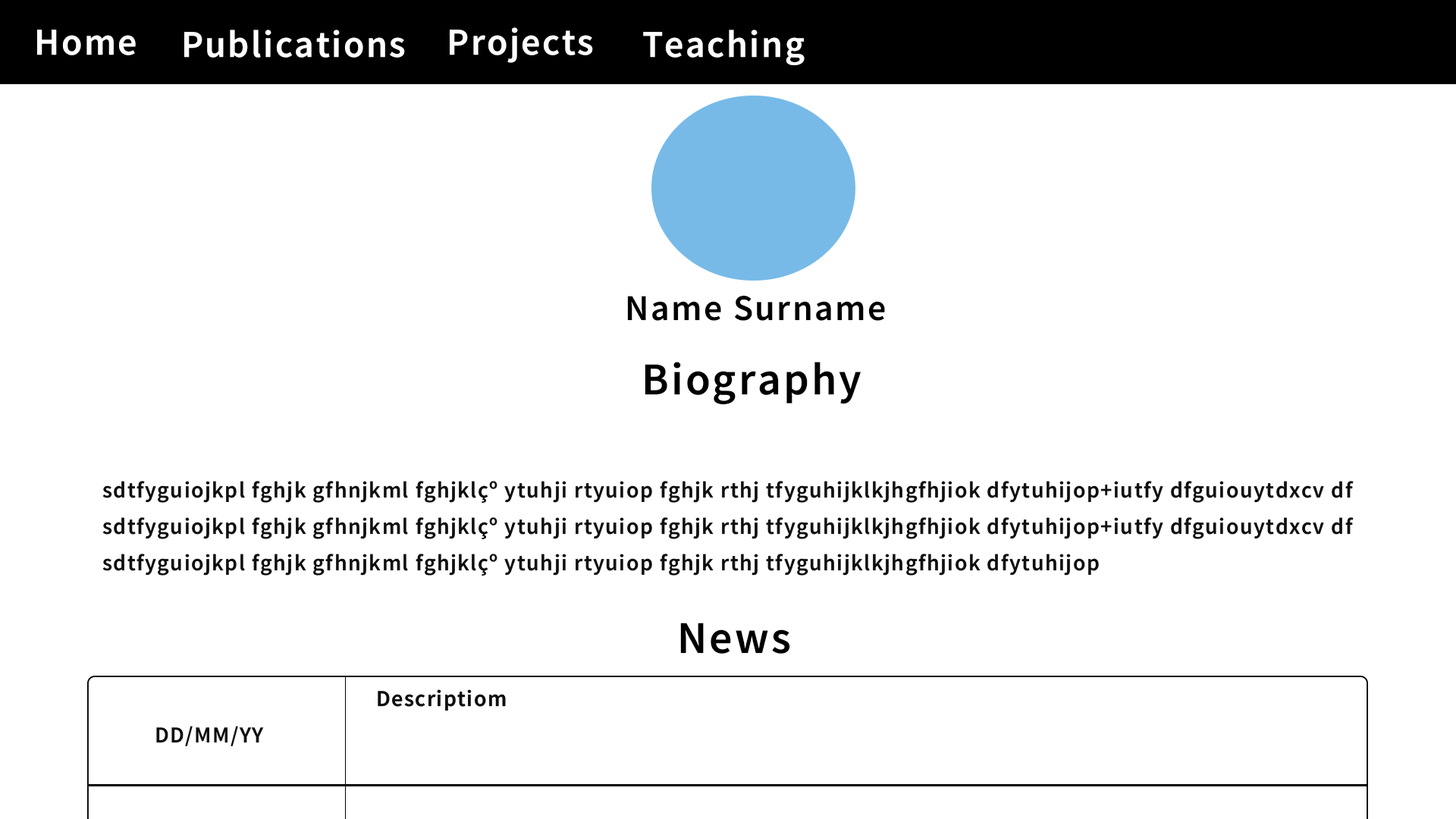
<style>
.page{position:relative;width:1456px;height:819px;background:#ffffff}
.page>*{position:absolute;margin:0}
.t1{font:37.9px "SourceSansRoman-Semibold";letter-spacing:0.05em;color:#ffffff}
.t2{font:36.4px "SourceSansRoman-Semibold";letter-spacing:0.05em;color:#000000}
.t3{font:45.5px "SourceSansRoman-Semibold";letter-spacing:0.05em;color:#000000}
.t4{font:22.7px/36.4px "SourceSansRoman-Semibold";letter-spacing:0.05em;color:#0f0f0f}
.t5{font:22.7px "SourceSansRoman-Semibold";letter-spacing:0.05em;color:#0f0f0f}
</style>
<div class="page">
<p class="t1" style="left:37px;top:30px;width:99px;height:25px">Home</p>
<p class="t1" style="left:184px;top:30px;width:221px;height:28px">Publications</p>
<p class="t1" style="left:450px;top:27px;width:143px;height:36px">Projects</p>
<p class="t1" style="left:643px;top:30px;width:162px;height:35px">Teaching</p>
<p class="t2" style="left:627px;top:295px;width:258px;height:26px">Name Surname</p>
<p class="t3" style="left:645px;top:362px;width:216px;height:43px">Biography</p>
<p class="t4" style="left:102px;top:481px;width:1252px;height:95px">sdtfyguiojkpl fghjk gfhnjkml fghjklçº ytuhji rtyuiop fghjk rthj tfyguhijklkjhgfhjiok dfytuhijop+iutfy dfguiouytdxcv df<br>sdtfyguiojkpl fghjk gfhnjkml fghjklçº ytuhji rtyuiop fghjk rthj tfyguhijklkjhgfhjiok dfytuhijop+iutfy dfguiouytdxcv df<br>sdtfyguiojkpl fghjk gfhnjkml fghjklçº ytuhji rtyuiop fghjk rthj tfyguhijklkjhgfhjiok dfytuhijop</p>
<p class="t3" style="left:680px;top:623px;width:110px;height:31px">News</p>
<p class="t5" style="left:156px;top:726px;width:108px;height:20px">DD/MM/YY</p>
</div>
